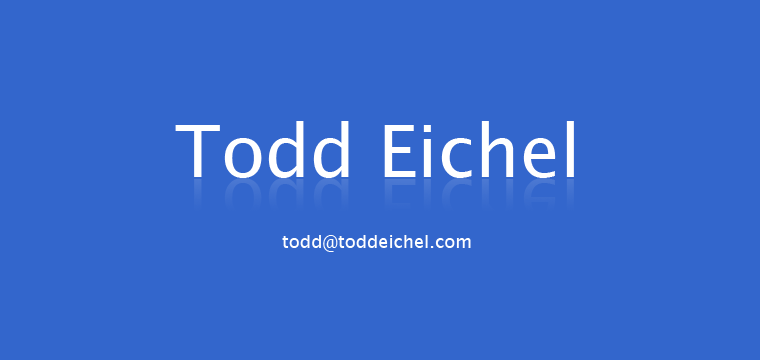
<style>
.page{position:relative;width:760px;height:360px;background:#3366cc}
.page>*{position:absolute;margin:0}
.t1{font:72px "LucidaGrande";color:#ffffff}
.t2{font:72px "LucidaGrande";color:#386acd}
.t3{font:18px "LucidaGrande";color:#ffffff}
</style>
<div class="page">
<p class="t1" style="left:175px;top:121px;width:399px;height:57px">Todd Eichel</p>
<p class="t2" style="left:175px;top:178px;width:399px;height:57px">Todd Eichel</p>
<p class="t3" style="left:282px;top:235px;width:189px;height:17px">todd@toddeichel.com</p>
</div>
